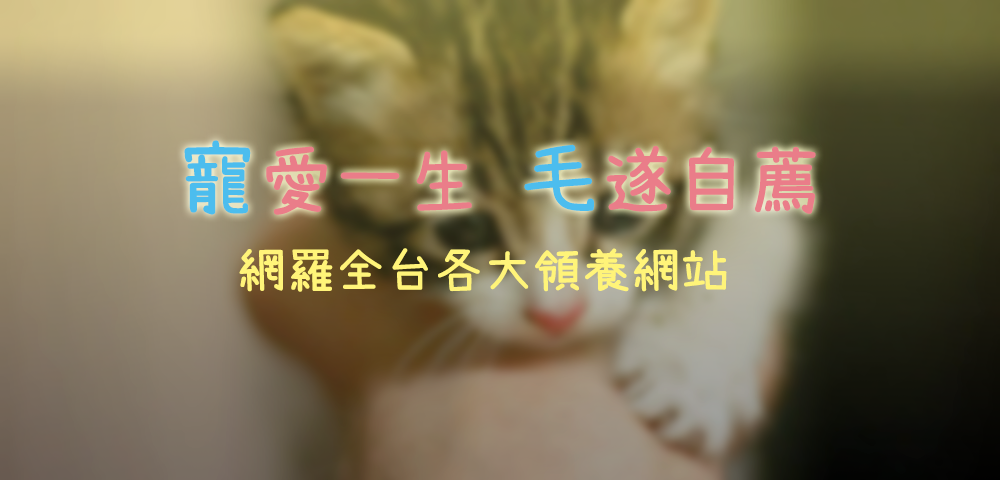
<style>
.page{position:relative;width:1000px;height:480px}
.page>*{position:absolute;margin:0}
.t1{font:72px "SetoFont";color:#ea7d89;font-weight:bold}
.t2{font:80px "SetoFont";color:#4cbdee;font-weight:bold}
.t3{font:48px "SetoFont";color:#fff479;font-weight:bold}
</style>
<div class="page">
<p class="t1" style="left:184px;top:140px;width:632px;height:75px"><span class="t2">寵</span>愛一生 <span class="t2">毛</span>遂自薦</p>
<p class="t3" style="left:239px;top:248px;width:488px;height:44px">網羅全台各大領養網站</p>
</div>
